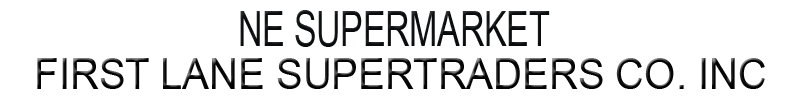
<style>
.page{position:relative;width:800px;height:100px;background:#ffffff}
.page>*{position:absolute;margin:0}
.t1{font:47.9px "ArialMT";color:#0a0d0e;scale:0.7 1}
.t2{font:43.1px "ArialMT";color:#050505;scale:0.93 1}
</style>
<div class="page">
<p class="t1" style="left:240px;top:10px;width:310px;height:37px">NE SUPERMARKET</p>
<p class="t2" style="left:37px;top:58px;width:728px;height:31px">FIRST LANE SUPERTRADERS CO. INC</p>
</div>
